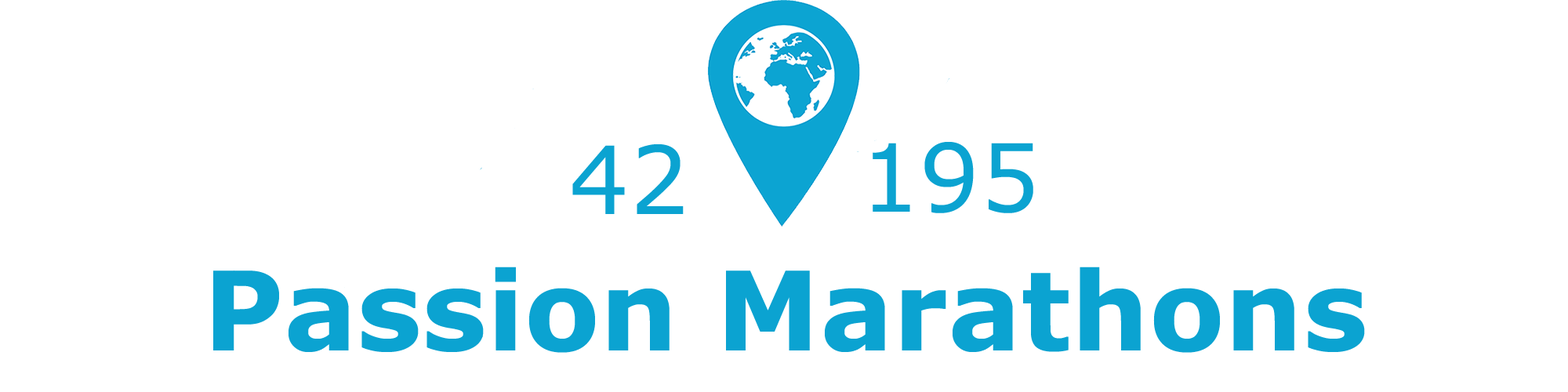
<style>
.page{position:relative;width:1568px;height:392px;background:#ffffff}
.page>*{position:absolute;margin:0}
.t1{font:94.1px "Verdana";color:#0ba3d1}
.t2{font:109.8px "Verdana-Bold";color:#0ba3d1}
</style>
<div class="page">
<p class="t1" style="left:572px;top:144px;width:112px;height:70px">42</p>
<p class="t1" style="left:873px;top:142px;width:160px;height:71px">195</p>
<p class="t2" style="left:213px;top:267px;width:1152px;height:86px">Passion Marathons</p>
</div>
